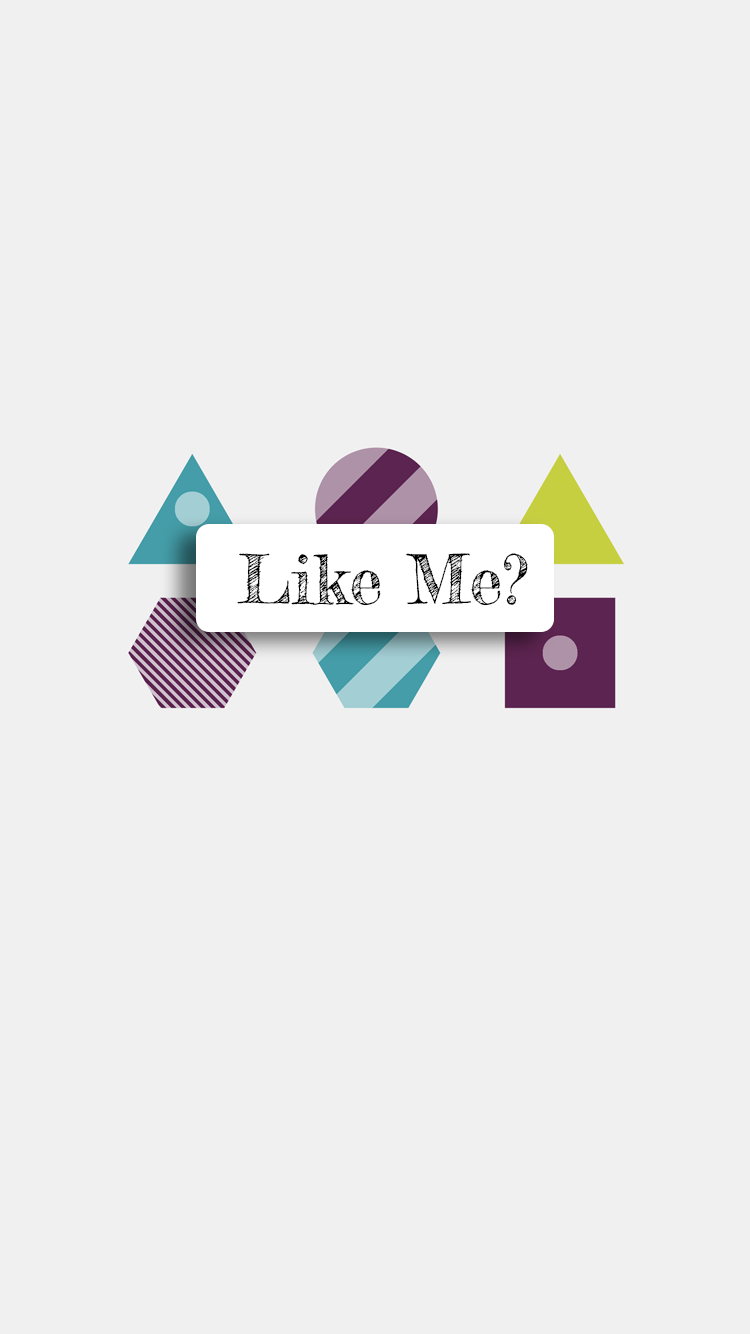
<style>
.page{position:relative;width:750px;height:1334px;background:#f0f0f0}
.page>*{position:absolute;margin:0}
.t1{font:67px "FrederickatheGreat-Regular";color:#000000}
</style>
<div class="page">
<p class="t1" style="left:237px;top:553px;width:291px;height:53px">Like Me?</p>
</div>
